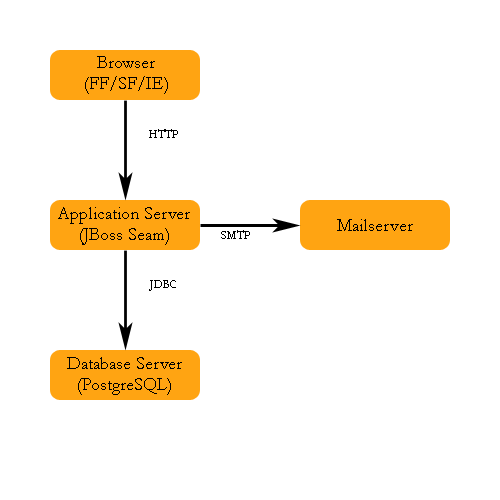
<style>
.page{position:relative;width:500px;height:500px;background:#ffffff}
.page>*{position:absolute;margin:0}
.t1{font:18px "Garamond";color:#000000}
.t2{font:12px "Garamond";color:#000000}
</style>
<div class="page">
<p class="t1" style="left:85px;top:56px;width:83px;height:38px;text-align:center">Browser<br>(FF/SF/IE)</p>
<p class="t2" style="left:149px;top:129px;width:29px;height:9px">HTTP</p>
<p class="t1" style="left:58px;top:207px;width:132px;height:38px;text-align:center">Application Server<br>(JBoss Seam)</p>
<p class="t1" style="left:337px;top:219px;width:76px;height:12px">Mailserver</p>
<p class="t2" style="left:221px;top:230px;width:29px;height:9px">SMTP</p>
<p class="t2" style="left:149px;top:280px;width:27px;height:11px">JDBC</p>
<p class="t1" style="left:67px;top:357px;width:115px;height:38px;text-align:center">Database Server<br>(PostgreSQL)</p>
</div>
